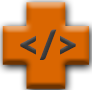
<style>
.page{position:relative;width:92px;height:90px;background:#da6601}
.page>*{position:absolute;margin:0}
.t1{font:195.9px "DeathStar";letter-spacing:0.01em}
.t2{font:38px "Lato-Black";letter-spacing:0.01em;color:#3b3b3b}
</style>
<div class="page">
<p class="t1" style="left:2px;top:2px;width:87px;height:87px">+</p>
<p class="t2" style="left:20px;top:29px;width:56px;height:31px">&lt;/&gt;</p>
</div>
